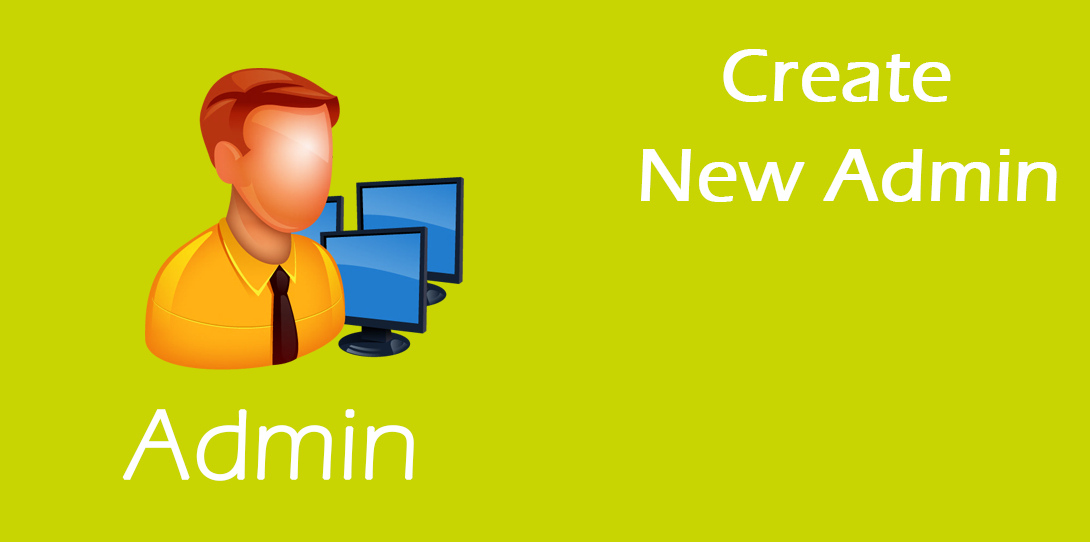
<style>
.page{position:relative;width:1090px;height:542px;background:#c9d503}
.page>*{position:absolute;margin:0}
.t1{font:76.3px/100px "ErasITC-Medium";color:#ffffff;font-weight:bold}
.t2{font:101.2px "ErasITC-Light";color:#ffffff;font-weight:bold}
</style>
<div class="page">
<p class="t1" style="left:641px;top:49px;width:416px;height:153px">Create<br> New Admin</p>
<p class="t2" style="left:122px;top:409px;width:292px;height:72px">Admin</p>
</div>
